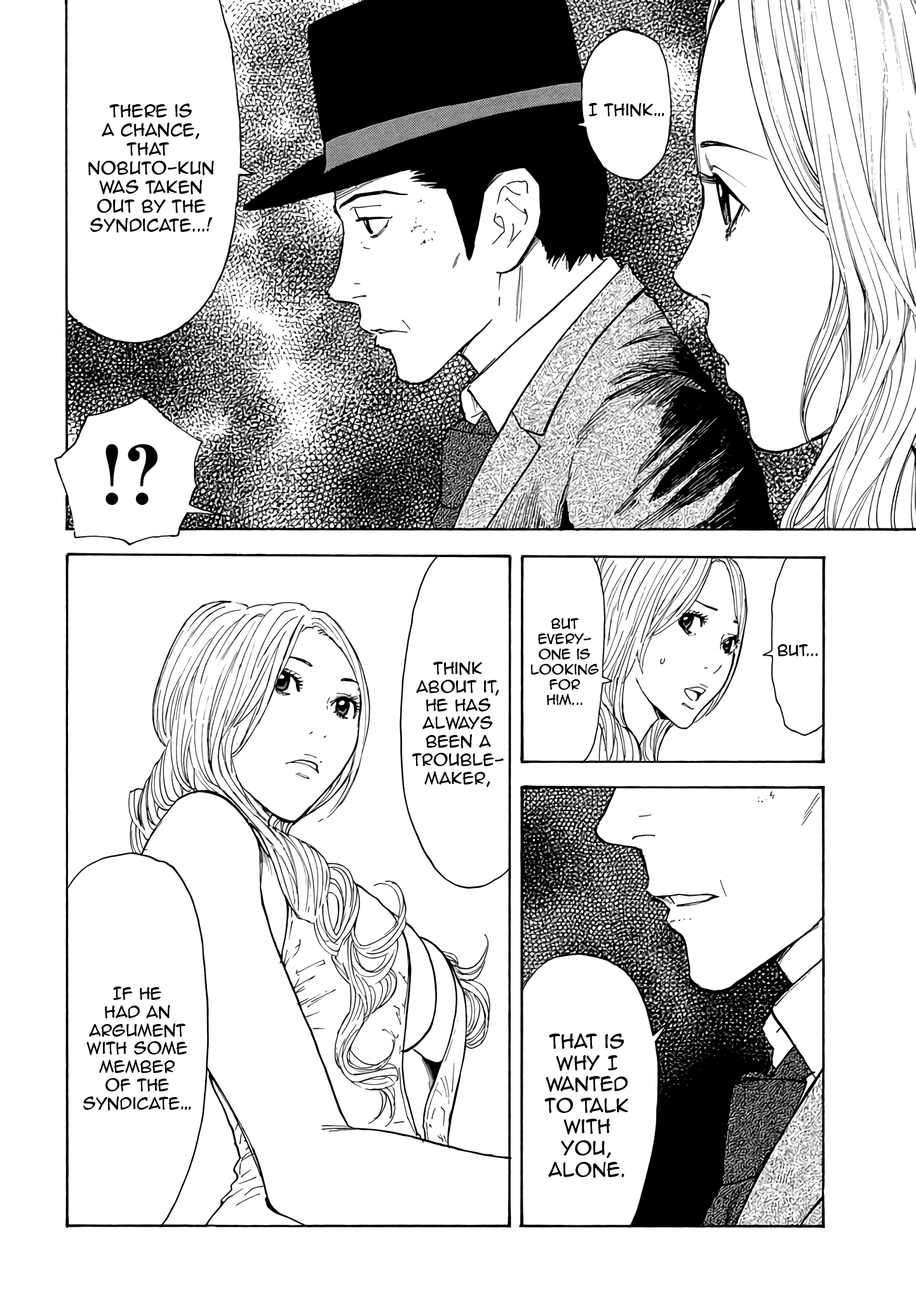
<style>
.page{position:relative;width:916px;height:1301px;background:#ffffff}
.page>*{position:absolute;margin:0}
.t1{font:15.9px "AnimeAce2.0BB";color:#000000}
.t2{font:15.3px "AnimeAce2.0BB";color:#000000}
.t3{font:12.7px "AnimeAce2.0BB";color:#000000}
.t4{font:14px "AnimeAce2.0BB";color:#000000}
.t5{font:17.8px "AnimeAce2.0BB";color:#000000}
</style>
<div class="page">
<p class="t1" style="left:88px;top:104px;width:126px;height:129px;text-align:center">there is<br>a chance,<br>that <br>Nobuto-kun<br>was taken<br>out by the<br>syndicate...!</p>
<p class="t2" style="left:589px;top:103px;width:76px;height:14px">I think…</p>
<p class="t3" style="left:531px;top:618px;width:68px;height:87px;text-align:center">But<br>Every-<br>one is<br>looking<br>for<br>him...</p>
<p class="t4" style="left:778px;top:644px;width:40px;height:12px">but...</p>
<p class="t2" style="left:412px;top:661px;width:92px;height:126px;text-align:center">Think<br>about it,<br>he has<br>always<br>been a<br>trouble-<br>maker,</p>
<p class="t2" style="left:83px;top:987px;width:108px;height:124px;text-align:center">If he <br>had an<br>argument with some member<br>of the<br>syndicate…</p>
<p class="t5" style="left:545px;top:1034px;width:84px;height:144px;text-align:center">That is<br>why I<br>wanted<br>to talk<br>with<br>you,<br>alone.</p>
</div>
